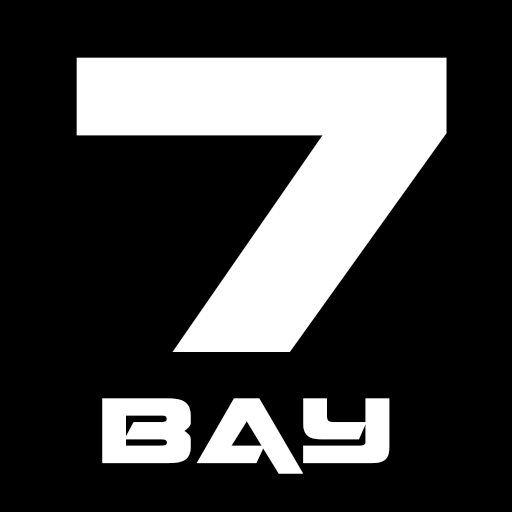
<style>
.page{position:relative;width:512px;height:512px;background:#000000}
.page>*{position:absolute;margin:0}
.t1{font:660.8px "QuarkStorm";color:#ffffff;font-variant:small-caps}
.t2{font:144.9px "QuarkStorm";color:#ffffff;font-variant:small-caps}
</style>
<div class="page">
<p class="t1" style="left:76px;top:57px;width:371px;height:295px">7</p>
<p class="t2" style="left:102px;top:398px;width:288px;height:76px">BAY</p>
</div>
